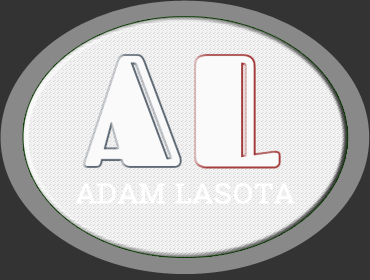
<style>
.page{position:relative;width:370px;height:280px;background:#333333}
.page>*{position:absolute;margin:0}
.t1{font:35.2px "RobotoSlab-Regular";color:#ffffff;font-variant:small-caps}
</style>
<div class="page">
<p class="t1" style="left:75px;top:183px;width:220px;height:21px">Adam Lasota</p>
</div>
